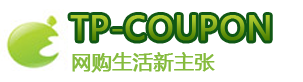
<style>
.page{position:relative;width:303px;height:82px;background:#ffffff}
.page>*{position:absolute;margin:0}
.t1{font:32px "MicrosoftYaHei";font-weight:bold}
.t2{font:20px "MicrosoftYaHei";color:#85bb3e;font-weight:bold}
</style>
<div class="page">
<p class="t1" style="left:70px;top:15px;width:200px;height:26px">TP-COUPON</p>
<p class="t2" style="left:72px;top:52px;width:143px;height:21px">网购生活新主张</p>
</div>
